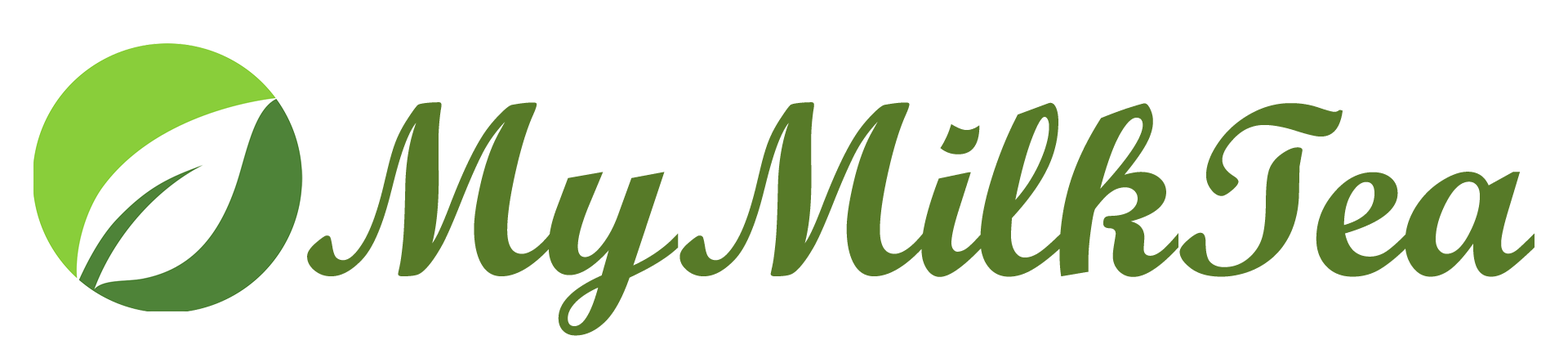
<style>
.page{position:relative;width:1568px;height:358px;background:#ffffff}
.page>*{position:absolute;margin:0}
.t1{font:245px "ScriptMTBold";color:#577a28}
</style>
<div class="page">
<p class="t1" style="left:307px;top:102px;width:1228px;height:234px">MyMilkTea</p>
</div>
